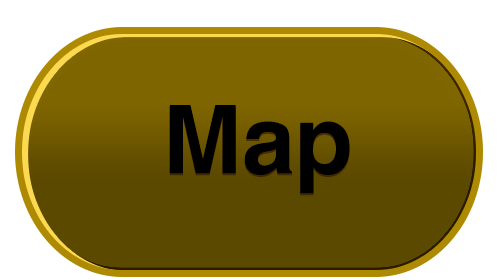
<style>
.page{position:relative;width:498px;height:280px;background:#5c4900}
.page>*{position:absolute;margin:0}
.t1{font:95px "Helvetica-Bold";color:#000000}
</style>
<div class="page">
<p class="t1" style="left:169px;top:105px;width:181px;height:89px">Map</p>
</div>
